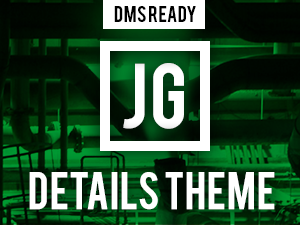
<style>
.page{position:relative;width:300px;height:225px}
.page>*{position:absolute;margin:0}
.t1{font:18px "Bebas";color:#000000}
.t2{font:72.2px "Bebas";color:#ffffff}
.t3{font:41.1px "Bebas";color:#ffffff}
</style>
<div class="page">
<p class="t1" style="left:114px;top:6px;width:82px;height:16px">DMS READY</p>
<p class="t2" style="left:123px;top:63px;width:61px;height:66px">JG</p>
<p class="t3" style="left:29px;top:172px;width:246px;height:38px">DETAILS THEME</p>
</div>
